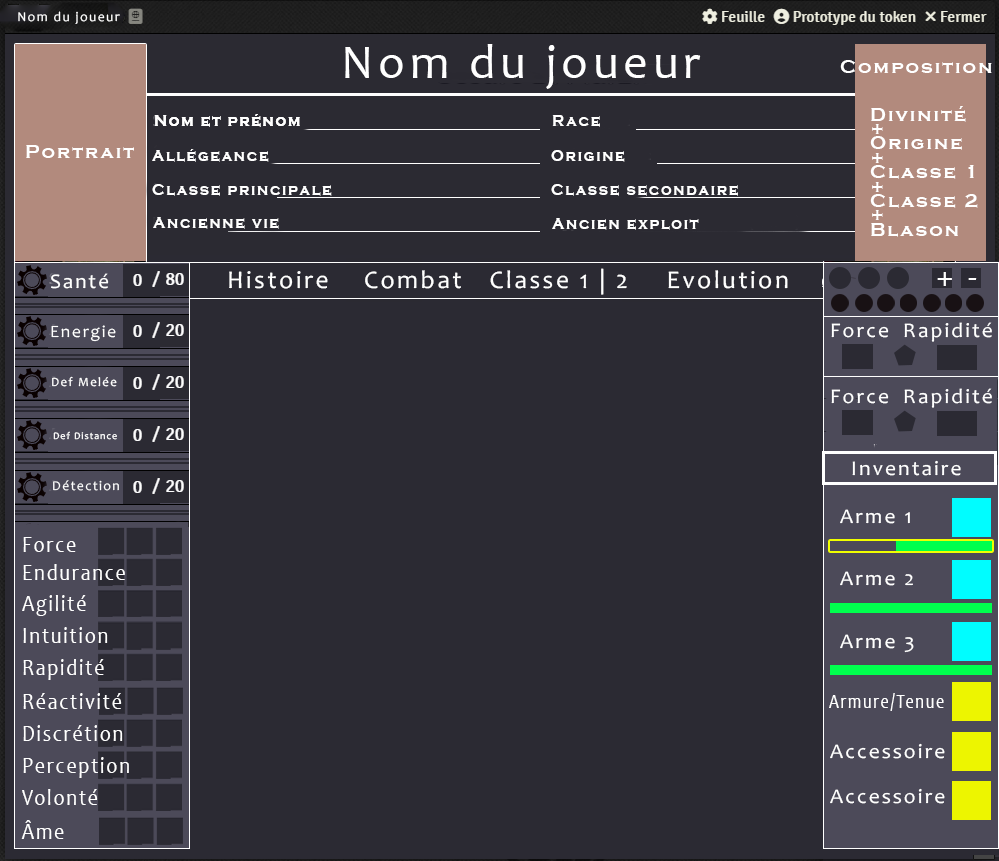
<style>
.page{position:relative;width:999px;height:861px;background:#2b2a33}
.page>*{position:absolute;margin:0}
.t1{font:13.6px "Candara";letter-spacing:0.1em;color:#ffffff}
.t2{font:48px "Candara";letter-spacing:0.1em;color:#ffffff}
.t3{font:19.2px "CopperplateGothic-Bold";letter-spacing:0.1em;color:#ffffff}
.t4{font:19.2px/14.4px "CopperplateGothic-Bold";letter-spacing:0.1em;color:#ffffff}
.t5{font:15.7px "CopperplateGothic-Bold";letter-spacing:0.1em;color:#ffffff}
.t6{font:25.4px "Candara";letter-spacing:0.1em;color:#ffffff}
.t7{font:20.9px "Candara";letter-spacing:0.1em;color:#ffffff}
.t8{font:34.5px "Candara";letter-spacing:0.1em;color:#ffffff}
.t9{font:17.2px "Candara";letter-spacing:0.1em;color:#ffffff}
.t10{font:12.7px "Candara";letter-spacing:0.1em;color:#ffffff}
.t11{font:10px "Candara";letter-spacing:0.1em;color:#ffffff}
.t12{font:22.7px "Candara";letter-spacing:0.1em;color:#ffffff;scale:0.86 1}
.t13{font:20.9px "Candara";letter-spacing:0.1em;color:#ffffff;scale:0.78 1}
</style>
<div class="page">
<p class="t1" style="left:18px;top:11px;width:102px;height:13px">Nom du joueur</p>
<p class="t2" style="left:345px;top:44px;width:356px;height:45px">Nom du joueur</p>
<p class="t3" style="left:840px;top:60px;width:152px;height:13px">Composition</p>
<p class="t4" style="left:870px;top:106px;width:108px;height:131px">Divinité<br>+<br>Origine<br>+<br>Classe 1<br>+ <br>Classe 2<br>+<br>Blason</p>
<p class="t5" style="left:154px;top:114px;width:146px;height:13px">Nom et prénom</p>
<p class="t5" style="left:154px;top:114px;width:146px;height:13px">Nom et prénom</p>
<p class="t5" style="left:552px;top:115px;width:48px;height:12px">Race</p>
<p class="t3" style="left:26px;top:145px;width:108px;height:13px">Portrait</p>
<p class="t5" style="left:152px;top:149px;width:117px;height:13px">Allégeance</p>
<p class="t5" style="left:551px;top:150px;width:74px;height:12px">Origine</p>
<p class="t5" style="left:152px;top:184px;width:180px;height:12px">Classe principale</p>
<p class="t5" style="left:551px;top:184px;width:187px;height:12px">Classe secondaire</p>
<p class="t5" style="left:153px;top:217px;width:126px;height:12px">Ancienne vie</p>
<p class="t5" style="left:552px;top:218px;width:147px;height:12px">Ancien exploit</p>
<p class="t6" style="left:365px;top:270px;width:96px;height:19px">Combat</p>
<p class="t6" style="left:490px;top:268px;width:137px;height:27px">Classe 1 | 2</p>
<p class="t6" style="left:668px;top:270px;width:120px;height:19px">Evolution</p>
<p class="t7" style="left:51px;top:273px;width:58px;height:16px">Santé</p>
<p class="t6" style="left:229px;top:271px;width:99px;height:18px">Histoire</p>
<p class="t8" style="left:937px;top:272px;width:40px;height:14px">+ -</p>
<p class="t9" style="left:51px;top:325px;width:65px;height:17px">Energie</p>
<p class="t7" style="left:831px;top:323px;width:58px;height:15px">Force</p>
<p class="t7" style="left:904px;top:322px;width:88px;height:20px">Rapidité</p>
<p class="t10" style="left:52px;top:376px;width:65px;height:11px">Def Melée</p>
<p class="t7" style="left:831px;top:389px;width:58px;height:15px">Force</p>
<p class="t7" style="left:904px;top:388px;width:88px;height:20px">Rapidité</p>
<p class="t11" style="left:53px;top:431px;width:64px;height:9px">Def Distance</p>
<p class="t7" style="left:852px;top:460px;width:109px;height:16px">Inventaire</p>
<p class="t1" style="left:53px;top:480px;width:66px;height:11px">Détection</p>
<p class="t7" style="left:840px;top:509px;width:70px;height:15px">Arme 1</p>
<p class="t12" style="left:23px;top:537px;width:53px;height:15px">Force</p>
<p class="t12" style="left:23px;top:564px;width:102px;height:16px">Endurance</p>
<p class="t7" style="left:840px;top:571px;width:73px;height:15px">Arme 2</p>
<p class="t12" style="left:22px;top:595px;width:64px;height:21px">Agilité</p>
<p class="t12" style="left:23px;top:627px;width:85px;height:16px">Intuition</p>
<p class="t7" style="left:840px;top:634px;width:74px;height:19px">Arme 3</p>
<p class="t12" style="left:23px;top:659px;width:81px;height:21px">Rapidité</p>
<p class="t12" style="left:23px;top:693px;width:99px;height:16px">Réactivité</p>
<p class="t13" style="left:829px;top:693px;width:115px;height:18px">Armure/Tenue</p>
<p class="t12" style="left:23px;top:725px;width:100px;height:16px">Discrétion</p>
<p class="t7" style="left:830px;top:743px;width:115px;height:16px">Accessoire</p>
<p class="t12" style="left:23px;top:757px;width:106px;height:21px">Perception</p>
<p class="t12" style="left:22px;top:789px;width:76px;height:16px">Volonté</p>
<p class="t7" style="left:830px;top:788px;width:115px;height:16px">Accessoire</p>
<p class="t12" style="left:21px;top:820px;width:43px;height:19px">Âme</p>
</div>
